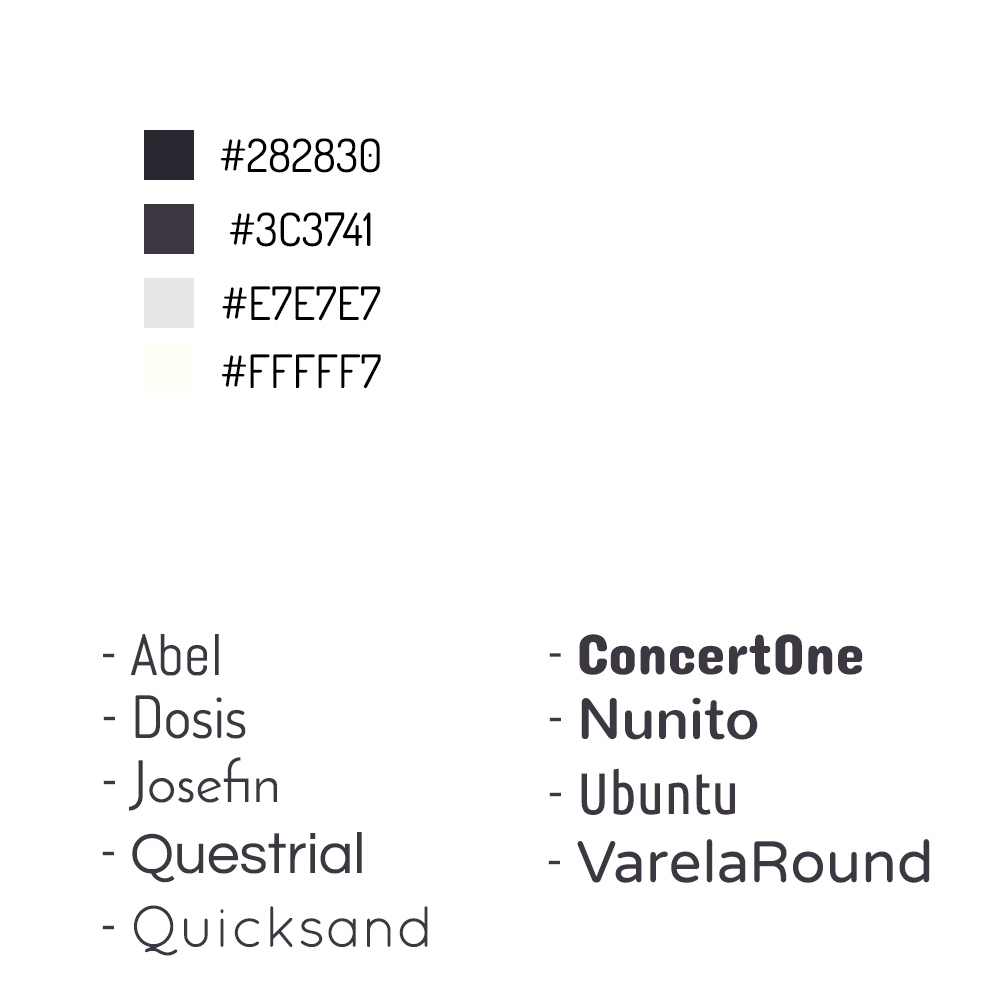
<style>
.page{position:relative;width:1000px;height:1000px;background:#ffffff}
.page>*{position:absolute;margin:0}
.t1{font:45.8px "Dosis-Regular";color:#000000}
.t2{font:58.3px "Abel-Regular";color:#3c3741}
.t3{font:58.3px "ConcertOne-Regular";color:#3c3741}
.t4{font:58.3px "Dosis-Regular";color:#3c3741}
.t5{font:58.3px "Nunito-Regular";color:#3c3741}
.t6{font:58.3px "JosefinSans";color:#3c3741}
.t7{font:58.3px "UbuntuCondensed-Regular";color:#3c3741}
.t8{font:58.3px "Questrial-Regular";color:#3c3741}
.t9{font:58.3px "VarelaRound-Regular";color:#3c3741}
.t10{font:58.3px "Quicksand-Regular";color:#3c3741}
</style>
<div class="page">
<p class="t1" style="left:220px;top:138px;width:160px;height:35px">#282830</p>
<p class="t1" style="left:229px;top:212px;width:142px;height:35px">#3C3741</p>
<p class="t1" style="left:222px;top:286px;width:159px;height:35px">#E7E7E7</p>
<p class="t1" style="left:221px;top:354px;width:160px;height:35px">#FFFFF7</p>
<p class="t2" style="left:103px;top:634px;width:116px;height:42px">- Abel</p>
<p class="t3" style="left:549px;top:634px;width:314px;height:41px"><span class="t2">- </span>ConcertOne</p>
<p class="t4" style="left:103px;top:695px;width:143px;height:44px"><span class="t2">- </span>Dosis</p>
<p class="t5" style="left:549px;top:697px;width:209px;height:43px"><span class="t2">- </span>Nunito</p>
<p class="t6" style="left:103px;top:757px;width:174px;height:54px"><span class="t2">- </span>Josefin</p>
<p class="t7" style="left:549px;top:768px;width:186px;height:47px"><span class="t2">- </span>Ubuntu</p>
<p class="t8" style="left:102px;top:832px;width:260px;height:51px"><span class="t2">- </span>Questrial</p>
<p class="t9" style="left:548px;top:839px;width:382px;height:44px"><span class="t2">- </span>VarelaRound</p>
<p class="t10" style="left:102px;top:905px;width:326px;height:51px"><span class="t2">- </span>Quicksand</p>
</div>
